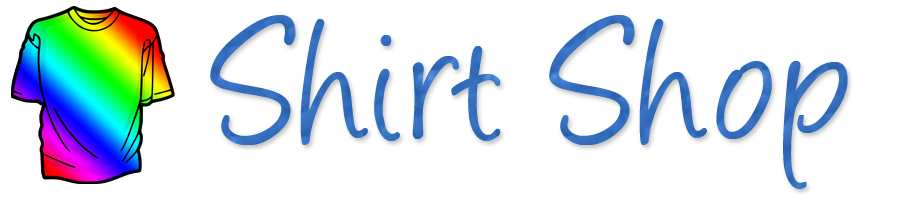
<style>
.page{position:relative;width:900px;height:200px;background:#ffffff}
.page>*{position:absolute;margin:0}
.t1{font:202px "Angelina";color:#346dbd}
</style>
<div class="page">
<p class="t1" style="left:210px;top:15px;width:638px;height:175px">Shirt Shop</p>
</div>
